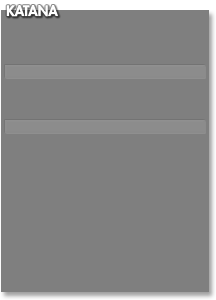
<style>
.page{position:relative;width:216px;height:300px;background:#7f7f7f}
.page>*{position:absolute;margin:0}
.t1{font:14px "Futura-Heavy";color:#ffffff}
</style>
<div class="page">
<p class="t1" style="left:6px;top:5px;width:52px;height:12px">KATANA</p>
</div>
